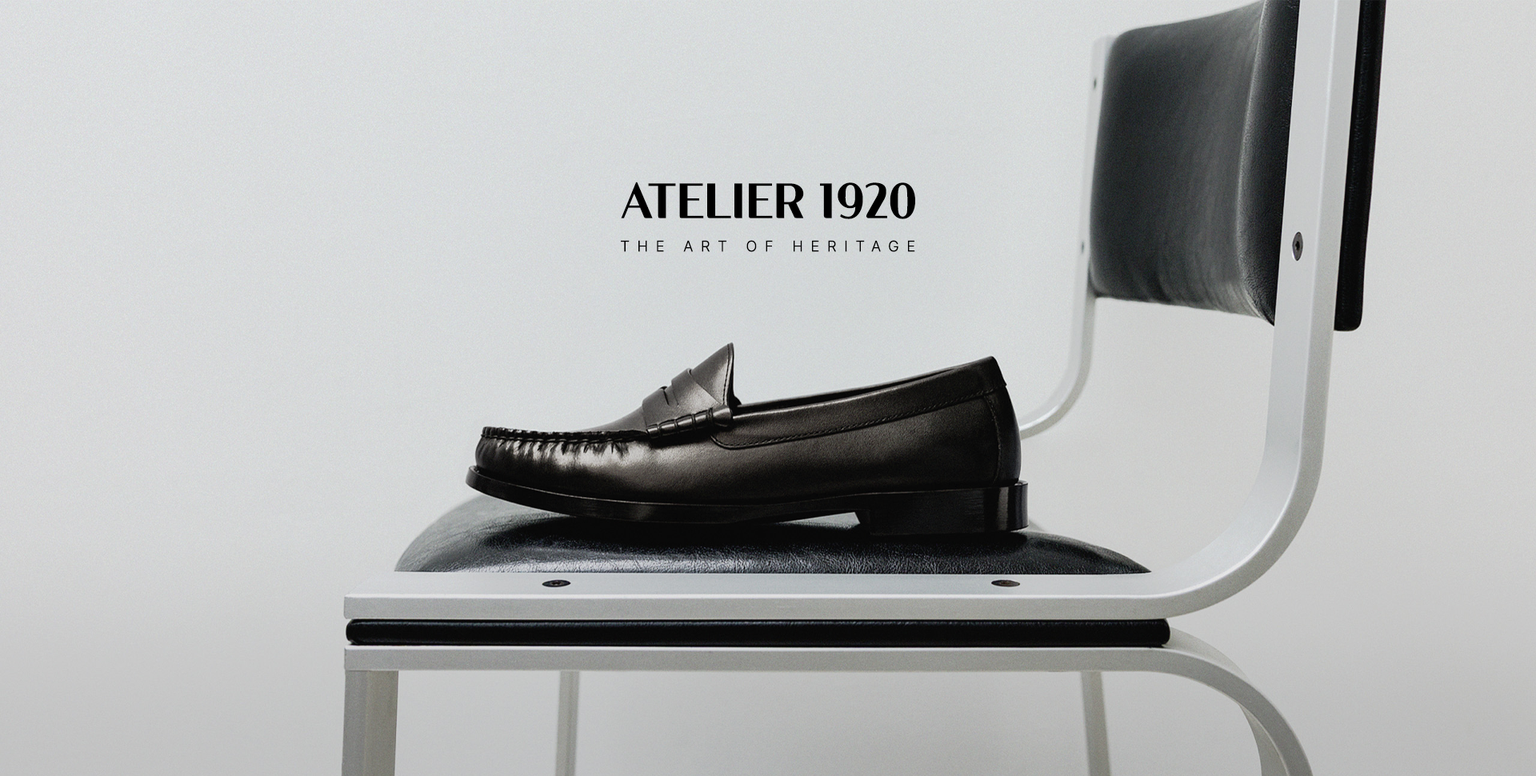
<style>
.page{position:relative;width:1536px;height:776px}
.page>*{position:absolute;margin:0}
.t1{font:48px "Cafe24Dangdanghae";color:#000000}
.t2{font:15.2px "Pretendard-Light";letter-spacing:0.5em;color:#000000;text-transform:uppercase}
</style>
<div class="page">
<p class="t1" style="left:621px;top:182px;width:294px;height:37px">ATELIER 1920</p>
<p class="t2" style="left:621px;top:240px;width:294px;height:12px">The Art of Heritage</p>
</div>
